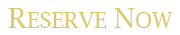
<style>
.page{position:relative;width:180px;height:35px;background:#ffffff}
.page>*{position:absolute;margin:0}
.t1{font:22px "LucidaBright";color:#dec767}
.t2{font:28px "LucidaBright";color:#dec767}
</style>
<div class="page">
<p class="t1" style="left:8px;top:8px;width:165px;height:20px"><span class="t2">R</span>ESERVE <span class="t2">N</span>OW</p>
</div>
